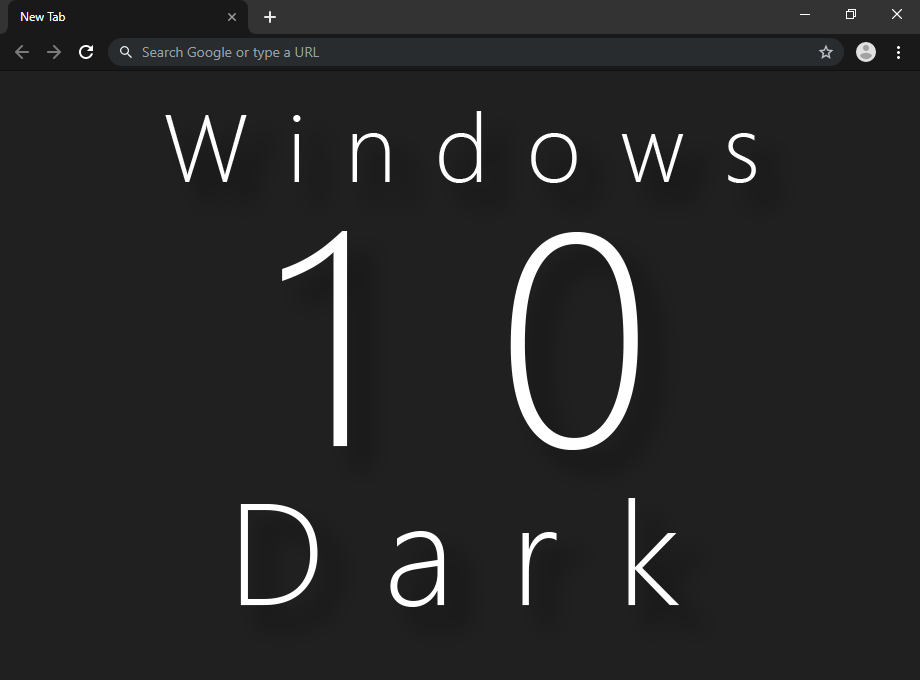
<style>
.page{position:relative;width:920px;height:680px;background:#202020}
.page>*{position:absolute;margin:0}
.t1{font:96px "SegoeUI-Light";letter-spacing:0.4em;color:#ffffff}
.t2{font:300px "SegoeUI-Light";letter-spacing:0.4em;color:#ffffff}
.t3{font:144px "SegoeUI-Light";letter-spacing:0.4em;color:#ffffff}
</style>
<div class="page">
<p class="t1" style="left:165px;top:111px;width:591px;height:72px">Windows</p>
<p class="t2" style="left:282px;top:231px;width:356px;height:219px">10</p>
<p class="t3" style="left:240px;top:498px;width:440px;height:109px">Dark</p>
</div>
